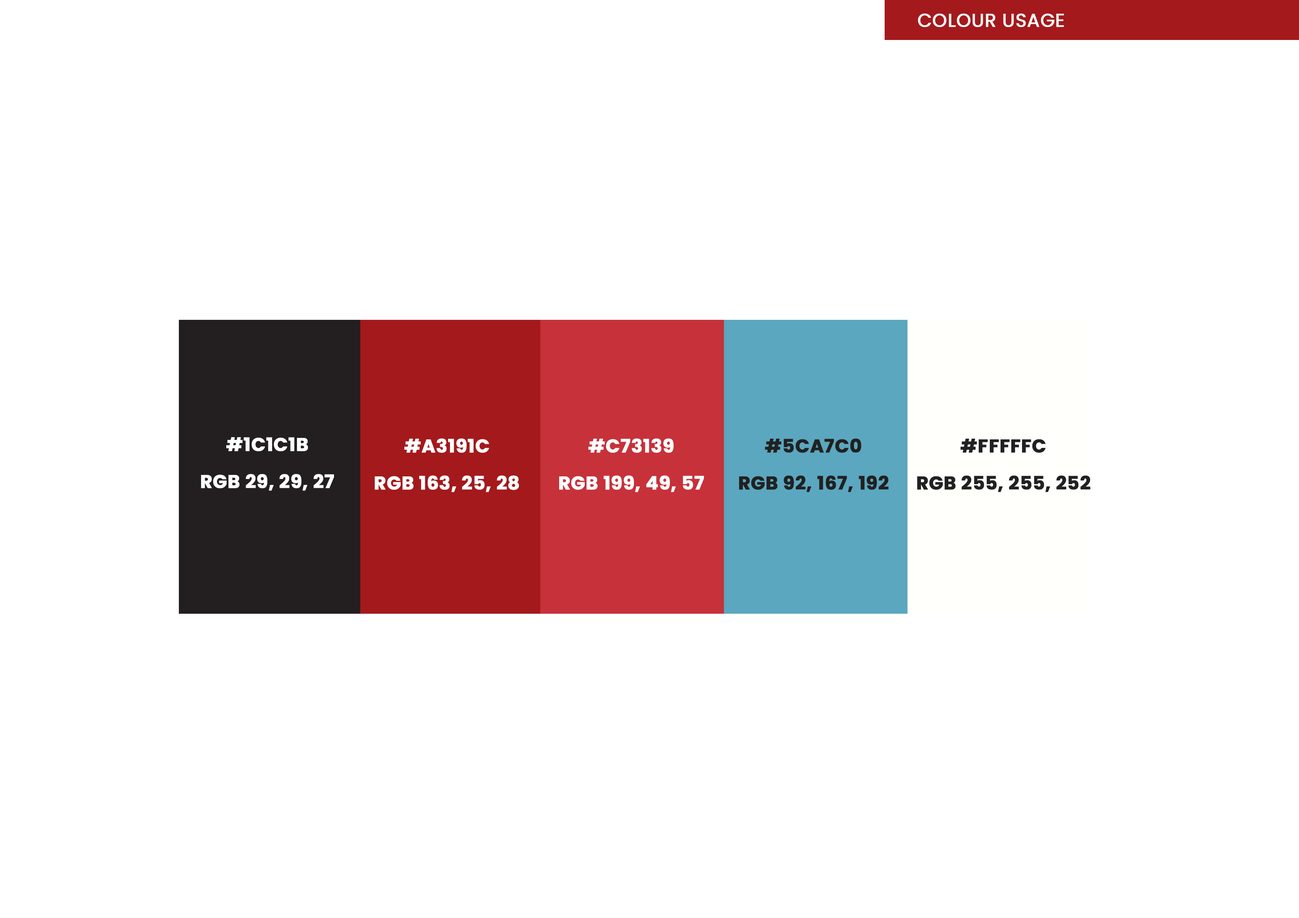
<style>
.page{position:relative;width:1299px;height:918px;background:#ffffff}
.page>*{position:absolute;margin:0}
.t1{font:18.5px "Poppins-Regular";letter-spacing:0.01em;color:#fffffc;font-weight:bold}
.t2{font:18.5px/37px "Poppins-Bold";letter-spacing:0.01em;color:#ffffff;font-weight:bold}
.t3{font:18.5px/37px "Poppins-Bold";letter-spacing:0.01em;color:#212121;font-weight:bold}
</style>
<div class="page">
<p class="t1" style="left:918px;top:13px;width:146px;height:14px">COLOUR USAGE</p>
<p class="t2" style="left:201px;top:437px;width:133px;height:54px;text-align:center">#1C1C1B<br>RGB 29, 29, 27</p>
<p class="t2" style="left:375px;top:438px;width:144px;height:54px;text-align:center">#A3191C<br>RGB 163, 25, 28</p>
<p class="t2" style="left:559px;top:438px;width:145px;height:54px;text-align:center">#C73139<br>RGB 199, 49, 57</p>
<p class="t3" style="left:739px;top:438px;width:150px;height:54px;text-align:center">#5CA7C0<br>RGB 92, 167, 192</p>
<p class="t3" style="left:917px;top:439px;width:173px;height:53px;text-align:center">#FFFFFC<br>RGB 255, 255, 252</p>
</div>
